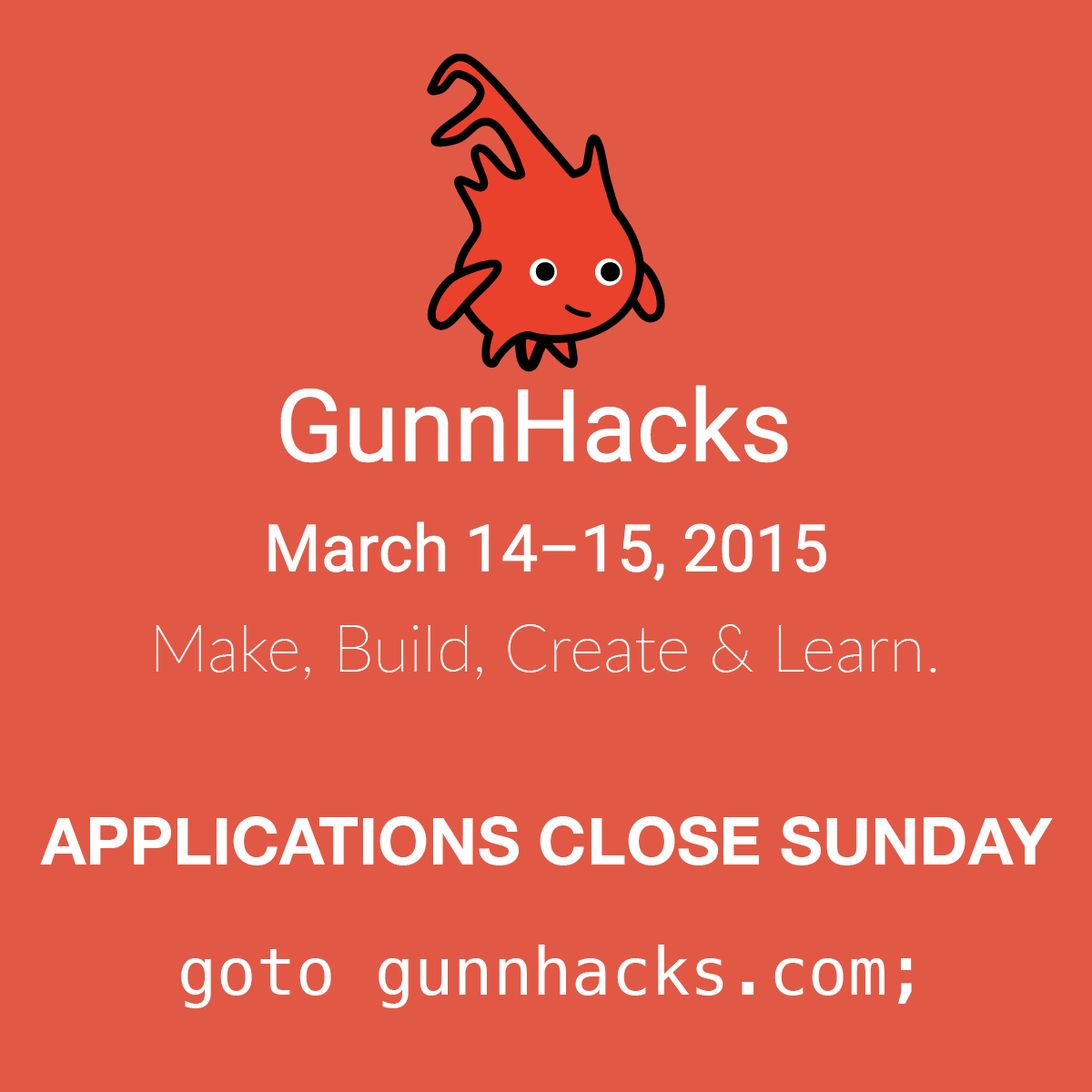
<style>
.page{position:relative;width:1092px;height:1092px;background:#e15945}
.page>*{position:absolute;margin:0}
.t1{font:65.5px "Lato-Thin";color:#ffffff}
.t2{font:65.5px "HelveticaNeue-Bold";color:#ffffff}
.t3{font:65.5px "Menlo-Regular";color:#ffffff}
</style>
<div class="page">
<p class="t1" style="left:156px;top:624px;width:780px;height:56px">Make, Build, Create &amp; Learn.</p>
<p class="t2" style="left:40px;top:816px;width:1013px;height:49px">APPLICATIONS CLOSE SUNDAY</p>
<p class="t3" style="left:181px;top:945px;width:731px;height:63px">goto gunnhacks.com;</p>
</div>
